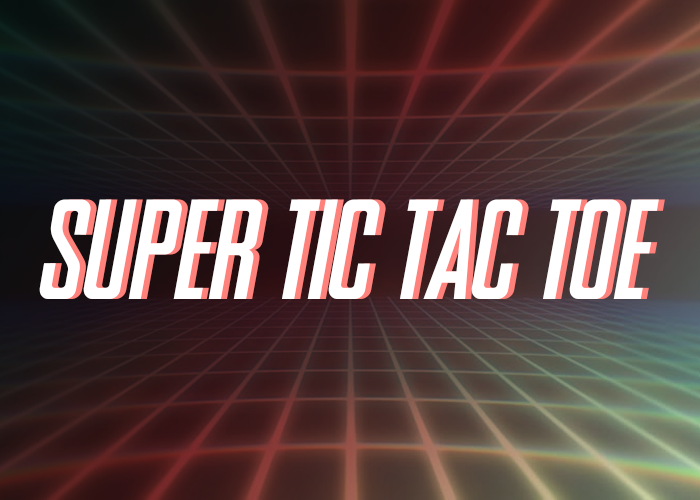
<style>
.page{position:relative;width:700px;height:500px}
.page>*{position:absolute;margin:0}
.t1{font:141.8px "SNES-Italic";color:#ffffff}
.t2{font:141.8px "SNES-Italic"}
</style>
<div class="page">
<p class="t1" style="left:39px;top:199px;width:620px;height:100px">SUPER TIC TAC TOE</p>
<p class="t2" style="left:45px;top:199px;width:620px;height:100px">SUPER TIC TAC TOE</p>
</div>
